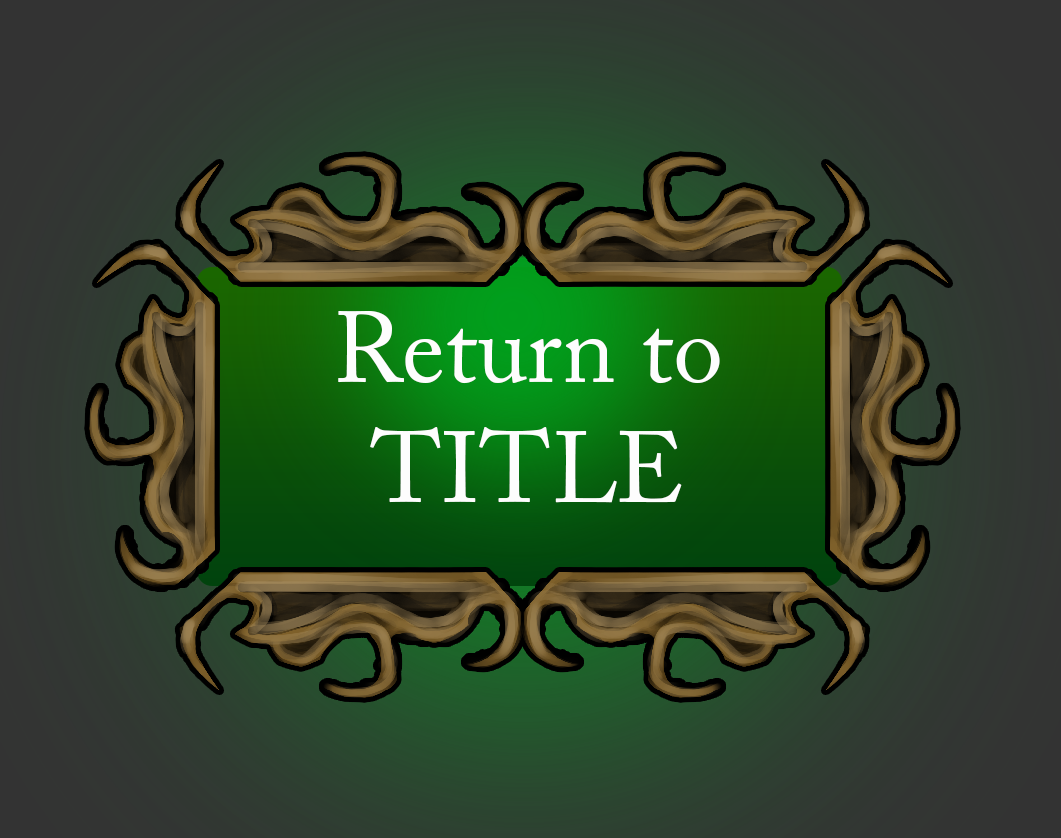
<style>
.page{position:relative;width:1061px;height:838px}
.page>*{position:absolute;margin:0}
.t1{font:100px "ACaslonPro-Regular";color:#fdfdfd}
</style>
<div class="page">
<p class="t1" style="left:338px;top:310px;width:382px;height:193px;text-align:center">Return to<br>TITLE</p>
</div>
